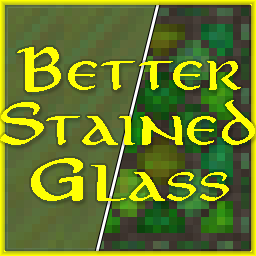
<style>
.page{position:relative;width:256px;height:256px}
.page>*{position:absolute;margin:0}
.t1{font:46px "Aniron";color:#ffff04;scale:1.1 1}
</style>
<div class="page">
<p class="t1" style="left:0px;top:47px;width:255px;height:154px;text-align:center">Better<br>Stained<br>Glass</p>
</div>
